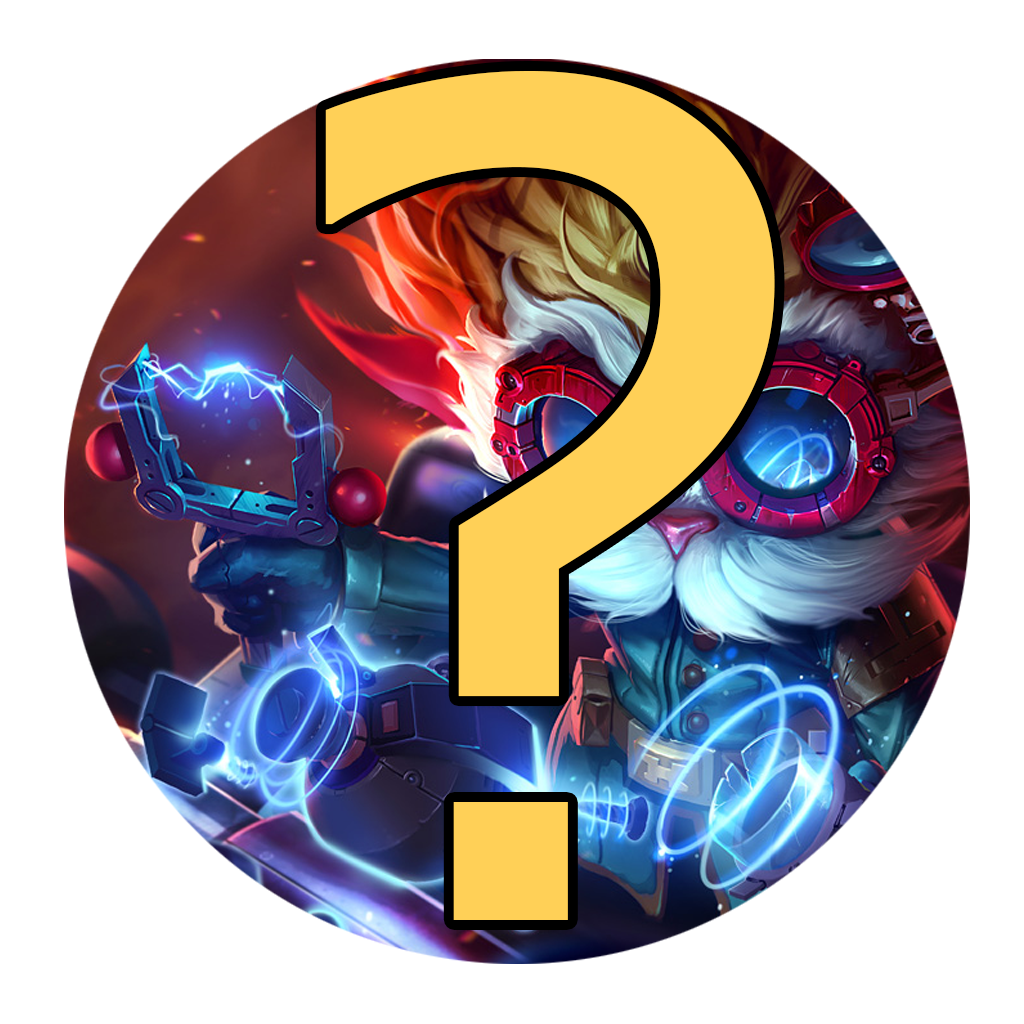
<style>
.page{position:relative;width:1024px;height:1024px;background:#ffffff}
.page>*{position:absolute;margin:0}
.t1{font:1144px "Tahoma";color:#ffd057}
</style>
<div class="page">
<p class="t1" style="left:325px;top:71px;width:450px;height:849px">?</p>
</div>
